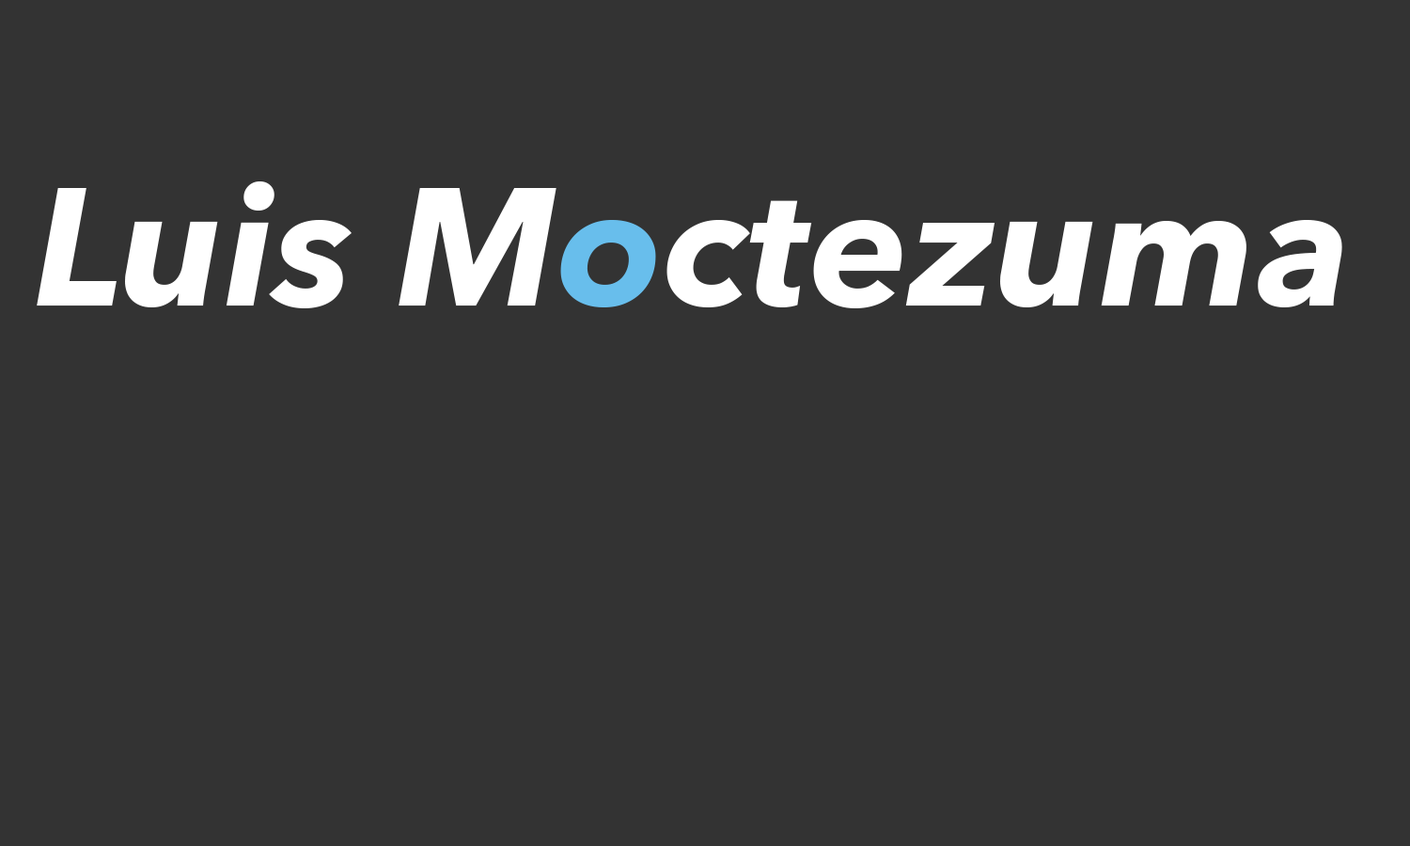
<style>
.page{position:relative;width:1410px;height:846px;background:#333333}
.page>*{position:absolute;margin:0}
.t1{font:166.6px "AvenirNext-BoldItalic";color:#ffffff}
.t2{font:166.6px "AvenirNext-BoldItalic";color:#68beec}
</style>
<div class="page">
<p class="t1" style="left:37px;top:181px;width:1305px;height:127px">Luis M<span class="t2">o</span>ctezuma</p>
</div>
